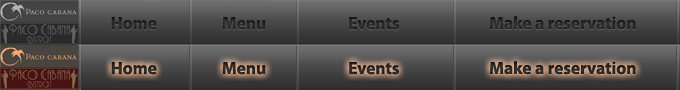
<style>
.page{position:relative;width:680px;height:90px}
.page>*{position:absolute;margin:0}
.t1{font:17.6px "MyriadPro-Bold";color:#282727}
.t2{font:17.6px "MyriadPro-Bold";color:#282828}
</style>
<div class="page">
<p class="t1" style="left:111px;top:17px;width:46px;height:13px">Home</p>
<p class="t1" style="left:222px;top:17px;width:44px;height:13px">Menu</p>
<p class="t1" style="left:349px;top:17px;width:50px;height:13px">Events</p>
<p class="t2" style="left:490px;top:16px;width:146px;height:14px">Make a reservation</p>
<p class="t1" style="left:111px;top:62px;width:46px;height:13px">Home</p>
<p class="t1" style="left:222px;top:62px;width:44px;height:13px">Menu</p>
<p class="t1" style="left:349px;top:62px;width:50px;height:13px">Events</p>
<p class="t2" style="left:490px;top:61px;width:146px;height:14px">Make a reservation</p>
</div>
